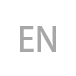
<style>
.page{position:relative;width:76px;height:76px;background:#ffffff}
.page>*{position:absolute;margin:0}
.t1{font:33.1px "AdobeHeitiStd-Regular";color:#a8a7a7}
</style>
<div class="page">
<p class="t1" style="left:20px;top:26px;width:36px;height:26px">EN</p>
</div>
